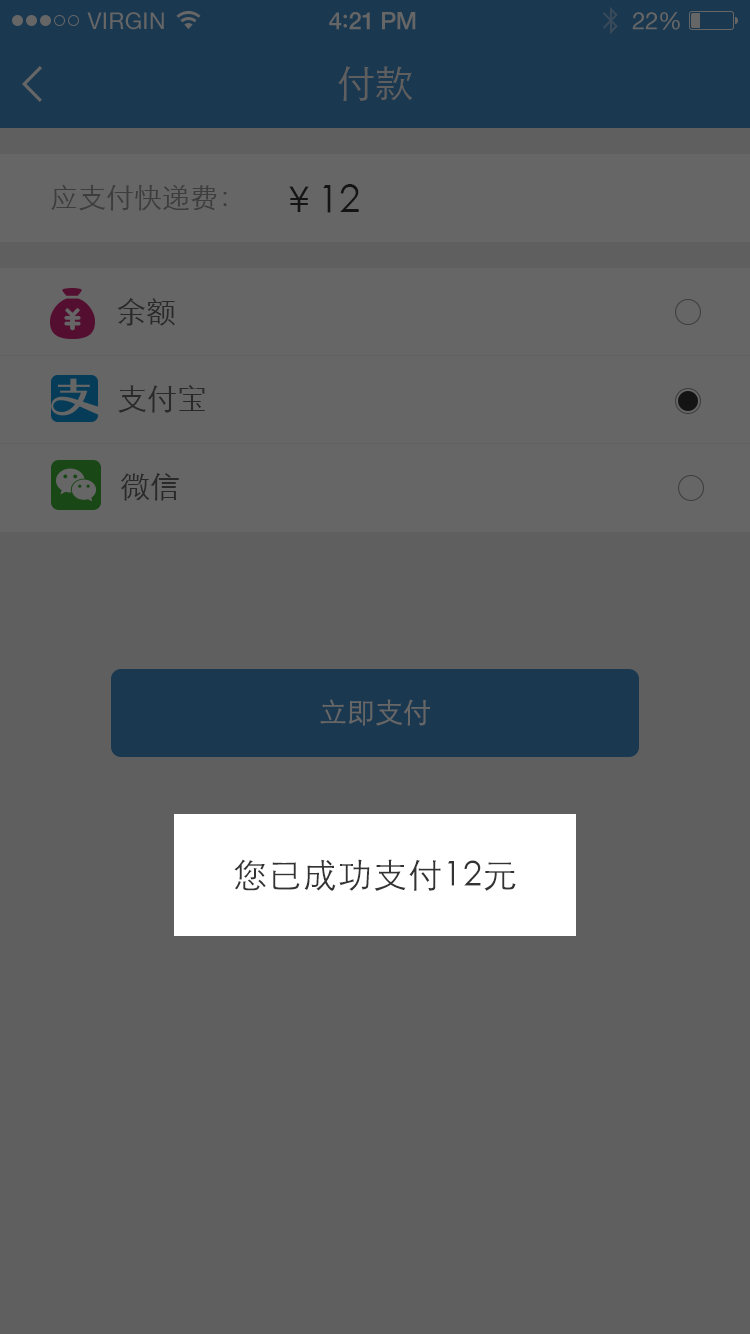
<style>
.page{position:relative;width:750px;height:1334px;background:#5f5f5f}
.page>*{position:absolute;margin:0}
.t1{font:23px "HelveticaNeue";letter-spacing:0.02em;color:#666666}
.t2{font:24px "HelveticaNeue-Medium";letter-spacing:-0.02em;color:#666666}
.t3{font:26px "Avenir-Medium";letter-spacing:-0.02em;color:#666666}
.t4{font:24px "HelveticaNeue";letter-spacing:-0.02em;color:#666666}
.t5{font:38px "STXihei";color:#5f5f5f}
.t6{font:28px "STXihei";color:#3d3d3d}
.t7{font:38px "STXihei";color:#141414}
.t8{font:30px "STXihei";color:#292929}
.t9{font:28px "STXihei";color:#666666}
.t10{font:34px "STXihei";letter-spacing:0.03em;color:#333333}
</style>
<div class="page">
<p class="t1" style="left:87px;top:12px;width:77px;height:18px">VIRGIN</p>
<p class="t2" style="left:329px;top:12px;width:87px;height:18px">4<span class="t3">:</span>21 PM</p>
<p class="t4" style="left:632px;top:12px;width:48px;height:18px">22%</p>
<p class="t5" style="left:338px;top:66px;width:74px;height:35px">付款</p>
<p class="t6" style="left:51px;top:184px;width:176px;height:27px">应支付快递费：</p>
<p class="t7" style="left:289px;top:184px;width:70px;height:29px">￥12</p>
<p class="t8" style="left:117px;top:298px;width:58px;height:28px">余额</p>
<p class="t8" style="left:118px;top:385px;width:87px;height:28px">支付宝</p>
<p class="t8" style="left:120px;top:473px;width:59px;height:28px">微信</p>
<p class="t9" style="left:320px;top:699px;width:110px;height:27px">立即支付</p>
<p class="t10" style="left:234px;top:859px;width:282px;height:32px">您已成功支付12元</p>
</div>
